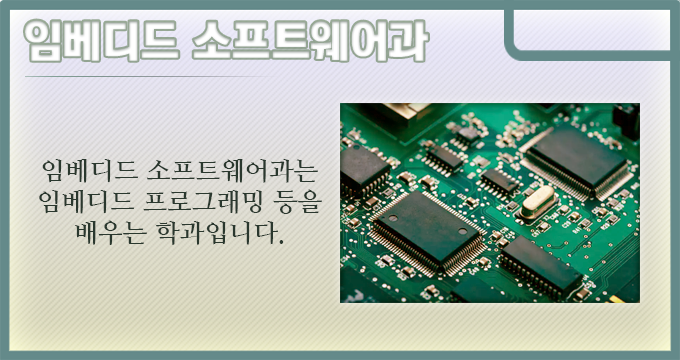
<style>
.page{position:relative;width:680px;height:360px}
.page>*{position:absolute;margin:0}
.t1{font:44px "KoreanTITGD5-R";letter-spacing:-0.01em;color:#ffffff}
.t2{font:26px "NanumMyeongjoBold";letter-spacing:-0.01em;color:#2a382e}
</style>
<div class="page">
<p class="t1" style="left:25px;top:20px;width:403px;height:41px">임베디드 소프트웨어과</p>
<p class="t2" style="left:39px;top:159px;width:283px;height:86px;text-align:center">임베디드 소프트웨어과는 임베디드 프로그래밍 등을 배우는 학과입니다.</p>
</div>
